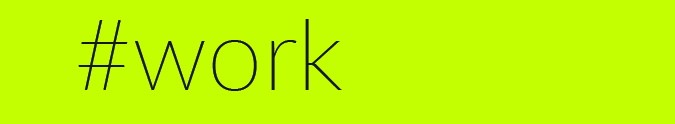
<style>
.page{position:relative;width:675px;height:124px;background:#c3ff01}
.page>*{position:absolute;margin:0}
.t1{font:100px "Lato-Thin";color:#141819}
</style>
<div class="page">
<p class="t1" style="left:78px;top:19px;width:264px;height:72px">#work</p>
</div>
